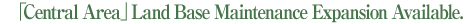
<style>
.page{position:relative;width:472px;height:24px;background:#ffffff}
.page>*{position:absolute;margin:0}
.t1{font:20px "RyuminPro-ExBold";letter-spacing:-0.08em;color:#46754a;scale:0.9 1}
</style>
<div class="page">
<p class="t1" style="left:20px;top:2px;width:443px;height:21px">「Central Area」Land Base Maintenance Expansion Available.</p>
</div>
